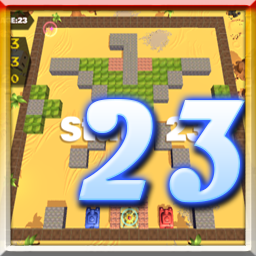
<style>
.page{position:relative;width:256px;height:256px}
.page>*{position:absolute;margin:0}
.t1{font:144.8px "Magneto-Bold";letter-spacing:0.02em;scale:0.83 1}
</style>
<div class="page">
<p class="t1" style="left:78px;top:99px;width:168px;height:104px">23</p>
</div>
